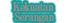
<style>
.page{position:relative;width:68px;height:23px;background:#ffffff}
.page>*{position:absolute;margin:0}
.t1{font:11px/10px "RyuminPro-ExBold";letter-spacing:-0.08em;color:#9c8c83;scale:0.9 1}
</style>
<div class="page">
<p class="t1" style="left:13px;top:2px;width:41px;height:21px;text-align:center">Kekuatan <br>Serangan</p>
</div>
